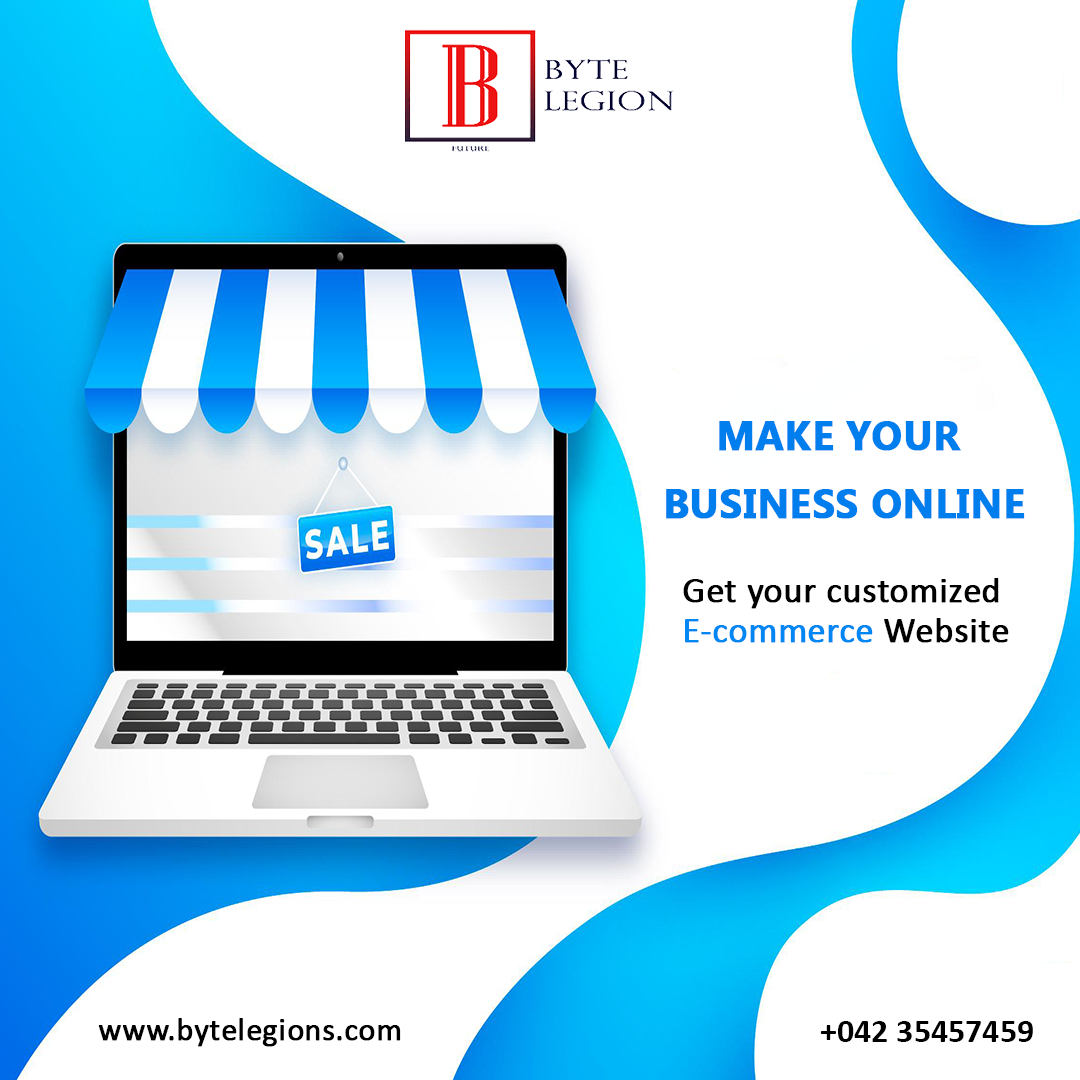
<style>
.page{position:relative;width:1080px;height:1080px;background:#ffffff}
.page>*{position:absolute;margin:0}
.t1{font:40px/68.3px "MyanmarText-Bold";color:#007eed;text-transform:uppercase;font-weight:bold}
.t2{font:36px/40px "Calibri";color:#000000;font-weight:bold}
.t3{font:36px/40px "Calibri";color:#0087f3;font-weight:bold}
.t4{font:32px "Calibri";color:#000000;font-weight:bold}
.t5{font:34px "Calibri-Bold";color:#000000}
</style>
<div class="page">
<p class="t1" style="left:666px;top:421px;width:359px;height:98px;text-align:center">Make Your <br>Business Online</p>
<p class="t2" style="left:683px;top:578px;width:326px;height:65px">Get your customized<br><span class="t3">E-commerce </span>Website</p>
<p class="t4" style="left:98px;top:1018px;width:303px;height:29px">www.bytelegions.com</p>
<p class="t5" style="left:820px;top:1021px;width:213px;height:21px">+042 35457459</p>
</div>
